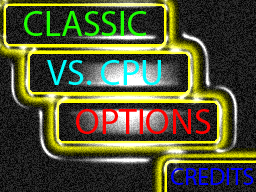
<style>
.page{position:relative;width:256px;height:192px}
.page>*{position:absolute;margin:0}
.t1{font:36px "MyriadPro-Regular";color:#1eff00}
.t2{font:36px "MyriadPro-Regular";color:#00ffff}
.t3{font:36px "MyriadPro-Regular";color:#ff0000}
.t4{font:24px "MyriadPro-Regular";color:#0000ff}
</style>
<div class="page">
<p class="t1" style="left:24px;top:11px;width:123px;height:25px">CLASSIC</p>
<p class="t2" style="left:47px;top:60px;width:114px;height:25px">VS. CPU</p>
<p class="t3" style="left:76px;top:109px;width:135px;height:25px">OPTIONS</p>
<p class="t4" style="left:171px;top:168px;width:83px;height:17px">CREDITS</p>
</div>
